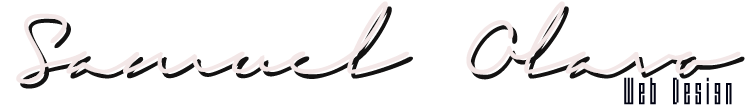
<style>
.page{position:relative;width:753px;height:105px;background:#ffffff}
.page>*{position:absolute;margin:0}
.t1{font:72px "SignericaFat";color:#010000;font-style:italic}
.t2{font:28.3px "BMcinemaA16";letter-spacing:0.15em;color:#010313}
</style>
<div class="page">
<p class="t1" style="left:20px;top:6px;width:725px;height:83px;opacity:0.93">Samuel Olavo</p>
<p class="t2" style="left:624px;top:77px;width:108px;height:28px">Web Design</p>
</div>
